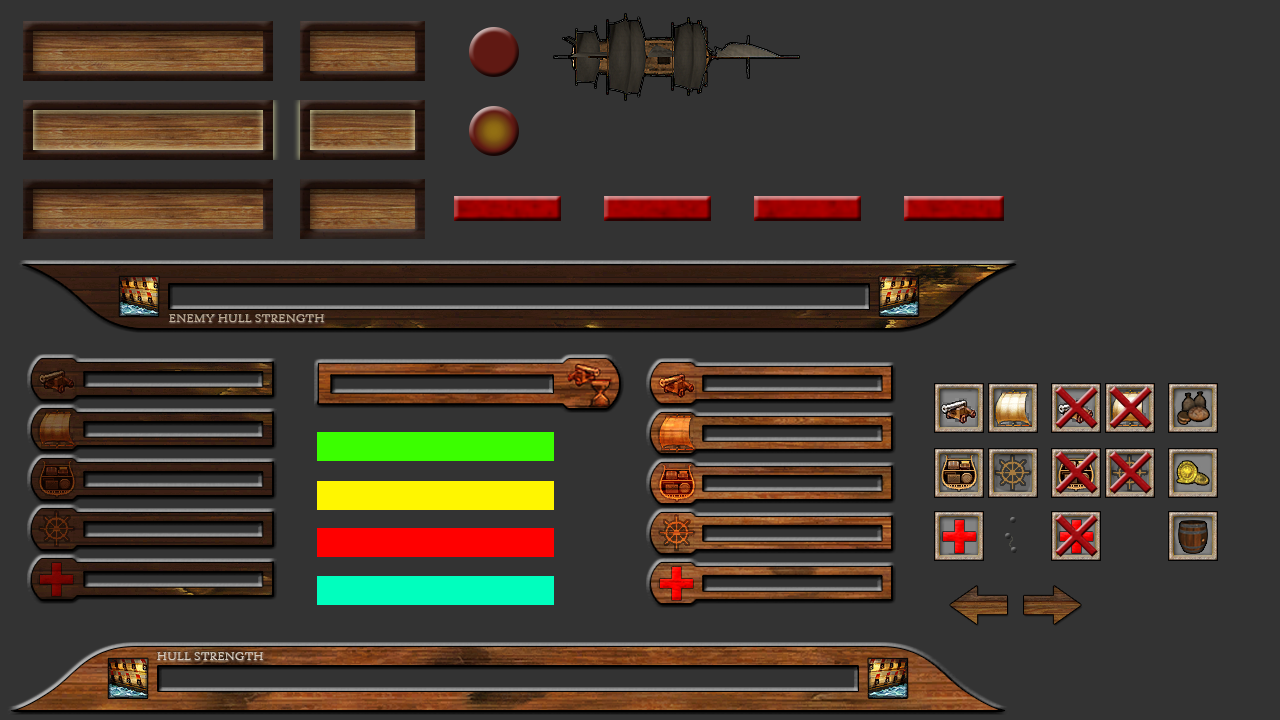
<style>
.page{position:relative;width:1280px;height:720px;background:#333333}
.page>*{position:absolute;margin:0}
.t1{font:12px "HighTowerText-Reg";color:#b8a78f}
.t2{font:12px "HighTowerText-Reg";color:#cfc4b6}
</style>
<div class="page">
<p class="t1" style="left:169px;top:314px;width:155px;height:8px">ENEMY HULL STRENGTH</p>
<p class="t2" style="left:157px;top:652px;width:106px;height:8px">HULL STRENGTH</p>
</div>
